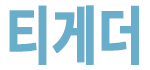
<style>
.page{position:relative;width:150px;height:70px;background:#ffffff}
.page>*{position:absolute;margin:0}
.t1{font:64px "NotoSansKR-Bold";letter-spacing:-0.025em;color:#68adc9;font-weight:bold;scale:0.77 1}
</style>
<div class="page">
<p class="t1" style="left:9px;top:5px;width:130px;height:60px">티게더</p>
</div>
